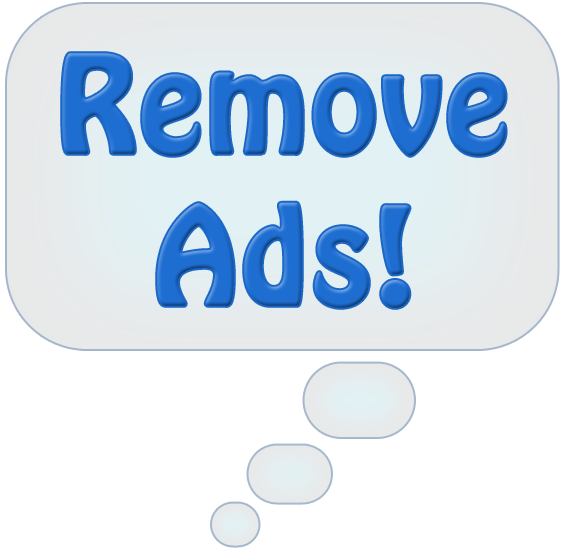
<style>
.page{position:relative;width:564px;height:551px;background:#ffffff}
.page>*{position:absolute;margin:0}
.t1{font:118.8px "HoboStd";letter-spacing:0.01em;color:#1e6ed2;font-weight:bold}
</style>
<div class="page">
<p class="t1" style="left:62px;top:53px;width:444px;height:103px">Remove</p>
<p class="t1" style="left:157px;top:202px;width:253px;height:106px">Ads!</p>
</div>
